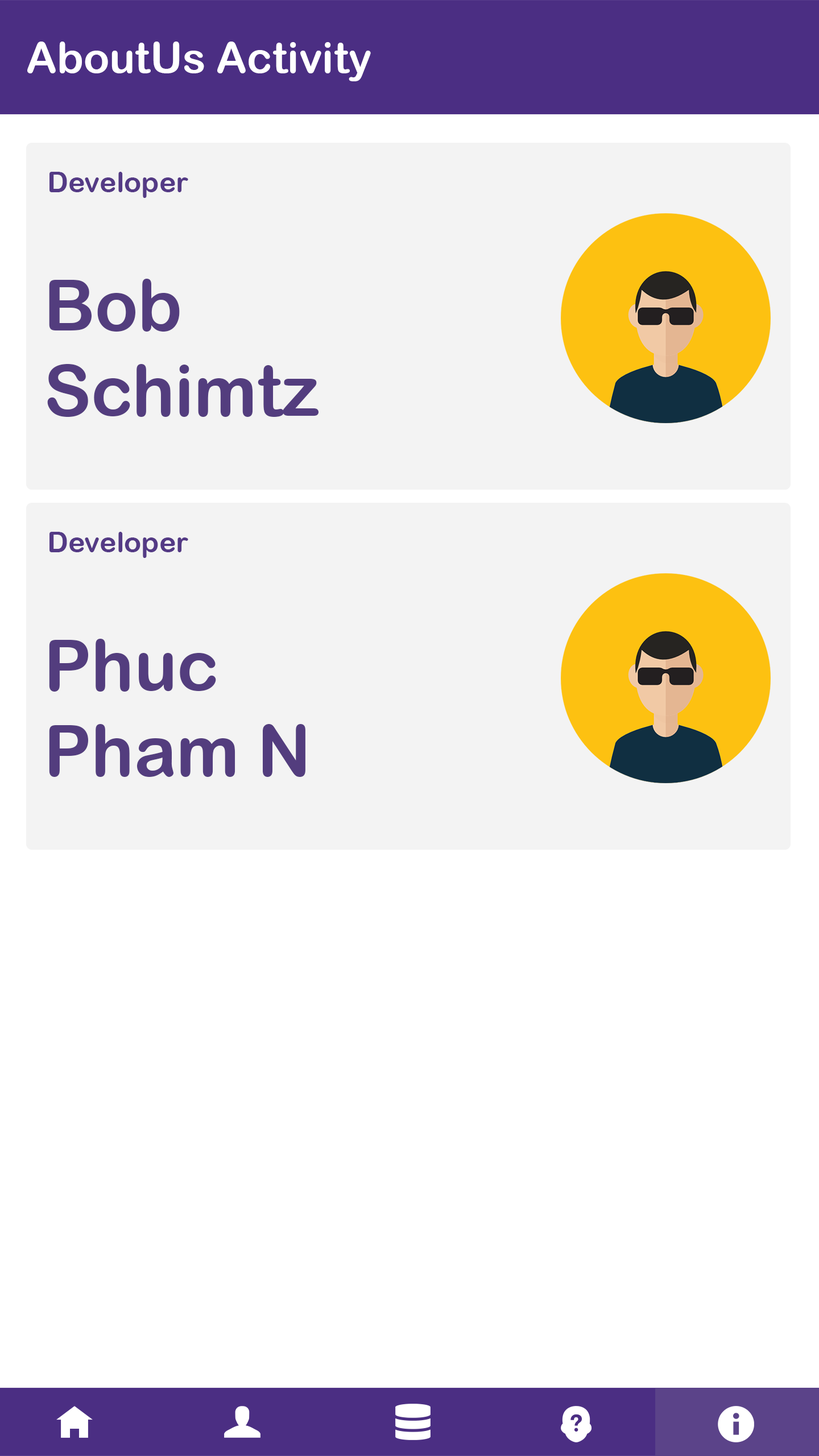
<style>
.page{position:relative;width:819px;height:1456px;background:#ffffff}
.page>*{position:absolute;margin:0}
.t1{font:42.7px "ArialRoundedMTBold";color:#ffffff}
.t2{font:28.4px "ArialRoundedMTBold";color:#4b2e83}
.t3{font:71.1px "ArialRoundedMTBold";color:#4a317b}
</style>
<div class="page">
<p class="t1" style="left:27px;top:42px;width:344px;height:39px">AboutUs Activity</p>
<p class="t2" style="left:49px;top:172px;width:139px;height:26px">Developer</p>
<p class="t3" style="left:47px;top:279px;width:272px;height:138px">Bob<br>Schimtz</p>
<p class="t2" style="left:49px;top:532px;width:139px;height:26px">Developer</p>
<p class="t3" style="left:49px;top:639px;width:256px;height:138px">Phuc<br>Pham N</p>
</div>
